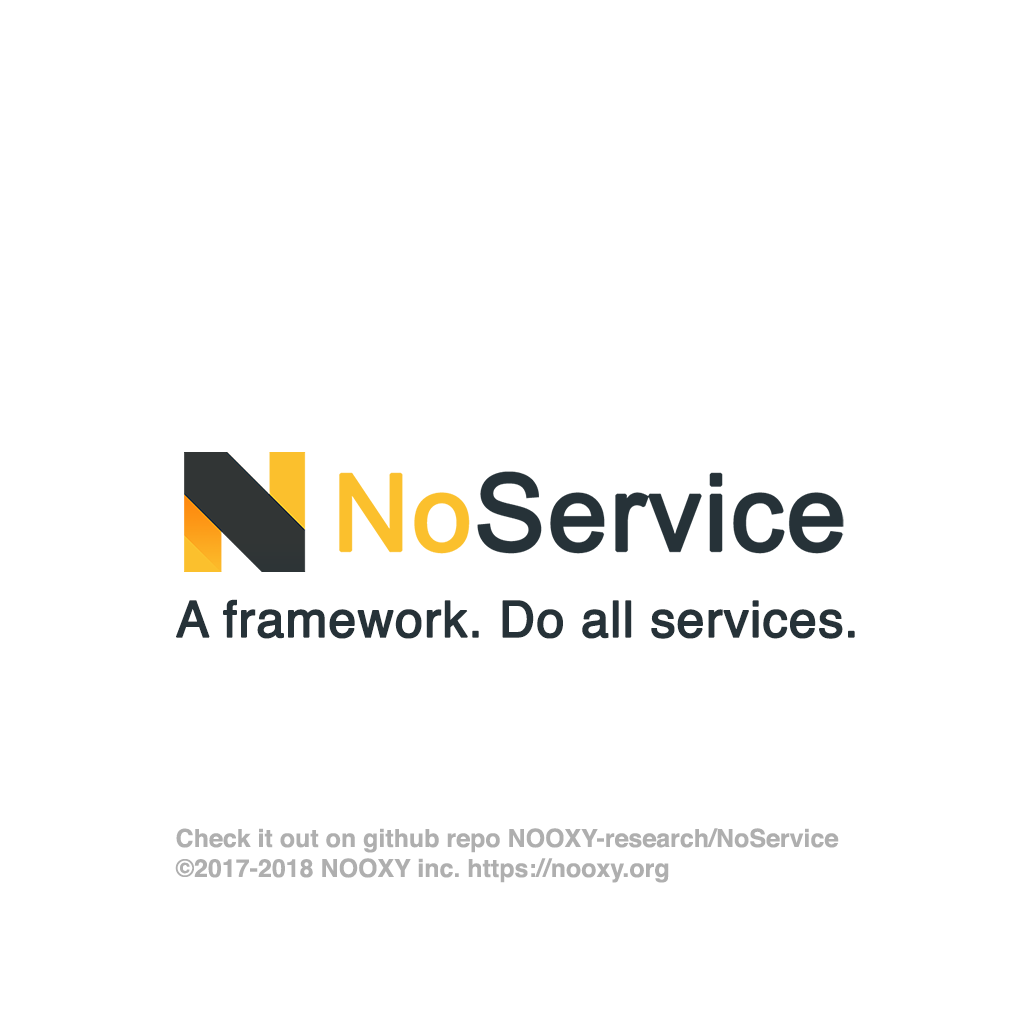
<style>
.page{position:relative;width:1024px;height:1024px;background:#ffffff}
.page>*{position:absolute;margin:0}
.t1{font:50px "Helvetica";color:#263238;font-weight:bold}
.t2{font:25px "Helvetica-Bold";color:#afafaf}
</style>
<div class="page">
<p class="t1" style="left:176px;top:599px;width:679px;height:40px">A framework. Do all services.</p>
<p class="t2" style="left:175px;top:828px;width:664px;height:55px">Check it out on github repo NOOXY-research/NoService<br>©2017-2018 NOOXY inc. https://nooxy.org</p>
</div>
